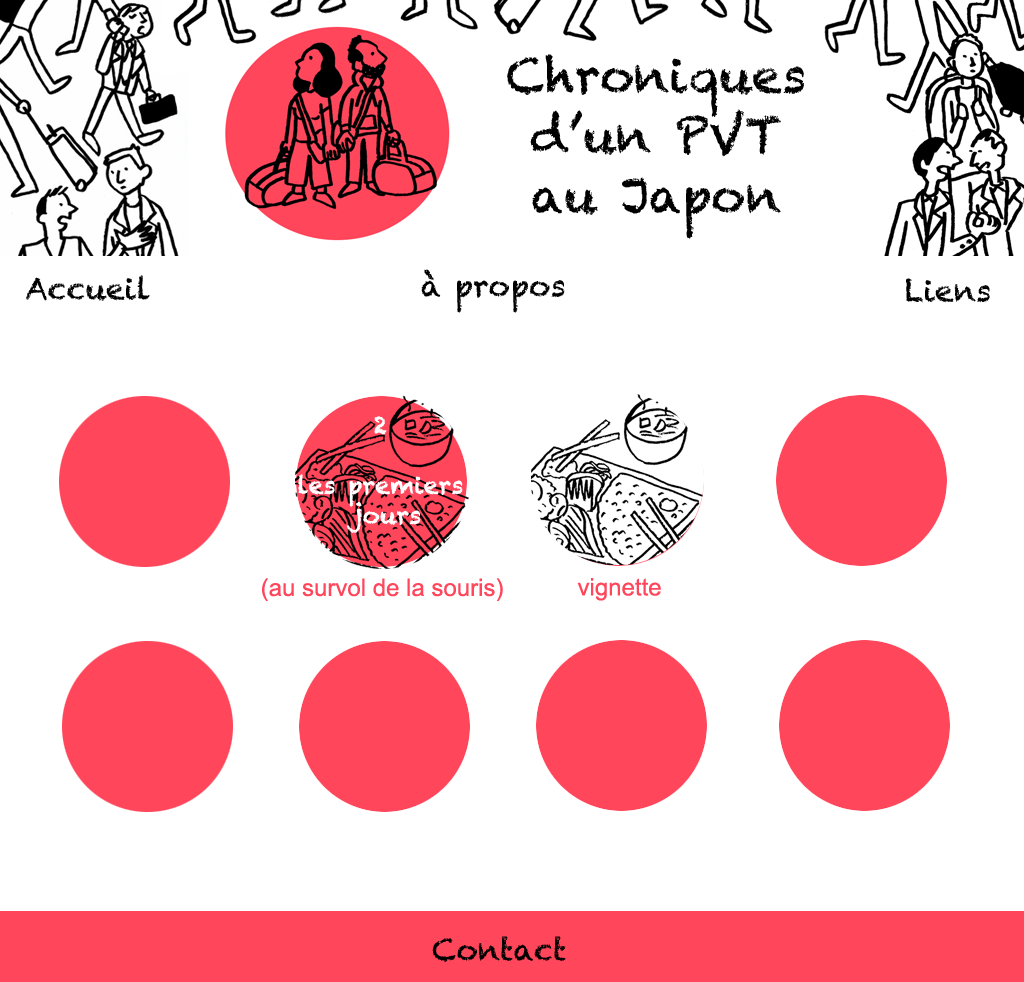
<style>
.page{position:relative;width:1024px;height:982px;background:#ffffff}
.page>*{position:absolute;margin:0}
.t1{font:30px "Chalkduster";color:#000000}
.t2{font:24px/30px "Chalkduster";color:#ffffff}
.t3{font:24px "ArialMT";color:#ff465b}
</style>
<div class="page">
<p class="t1" style="left:26px;top:275px;width:124px;height:26px">Accueil</p>
<p class="t1" style="left:906px;top:278px;width:84px;height:25px">Liens</p>
<p class="t2" style="left:298px;top:416px;width:165px;height:117px;text-align:center">2<br><br>les premiers<br> jours</p>
<p class="t3" style="left:262px;top:578px;width:241px;height:23px">(au survol de la souris)</p>
<p class="t3" style="left:577px;top:578px;width:84px;height:23px">vignette</p>
<p class="t1" style="left:432px;top:936px;width:134px;height:26px">Contact</p>
</div>
